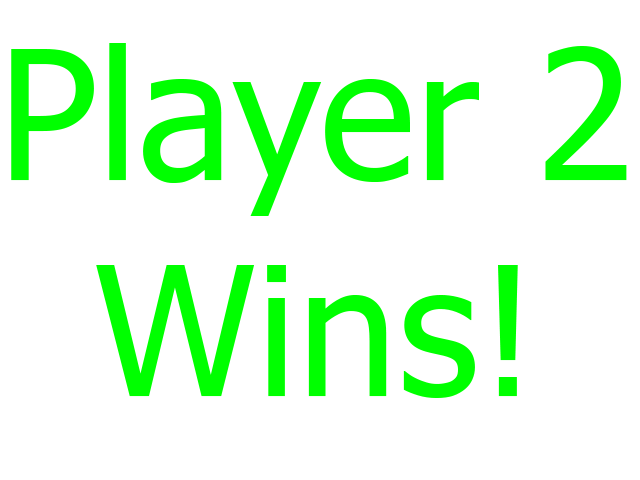
<style>
.page{position:relative;width:640px;height:480px;background:#ffffff}
.page>*{position:absolute;margin:0}
.t1{font:180px "Tahoma";color:#00ff00}
</style>
<div class="page">
<p class="t1" style="left:11px;top:43px;width:616px;height:355px;text-align:center">Player 2<br>Wins!</p>
</div>
